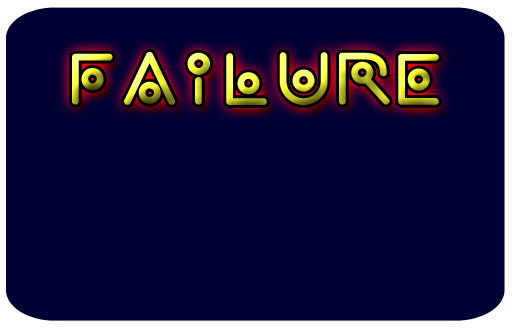
<style>
.page{position:relative;width:512px;height:330px;background:#000033}
.page>*{position:absolute;margin:0}
.t1{font:75px "wearealien!!"}
</style>
<div class="page">
<p class="t1" style="left:72px;top:52px;width:367px;height:53px">Failure</p>
</div>
